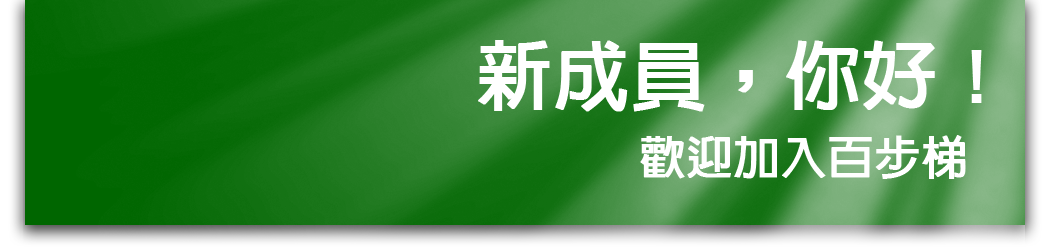
<style>
.page{position:relative;width:1050px;height:250px}
.page>*{position:absolute;margin:0}
.t1{font:75px "NewGothic-bold";color:#ffffff;font-weight:bold}
.t2{font:45.8px "NewGothic-bold";color:#ffffff;font-weight:bold}
</style>
<div class="page">
<p class="t1" style="left:478px;top:40px;width:504px;height:72px">新成員，你好！</p>
<p class="t2" style="left:640px;top:135px;width:326px;height:44px">歡迎加入百步梯</p>
</div>
